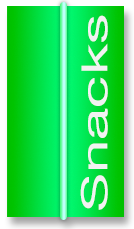
<style>
.page{position:relative;width:134px;height:229px}
.page>*{position:absolute;margin:0}
.t1{font:36.1px "HelveticaNeue";color:#f2f2f2;scale:1.66 1}
</style>
<div class="page">
<p class="t1" style="left:80px;top:15px;width:28px;height:195px;rotate:-90deg">Snacks</p>
</div>
